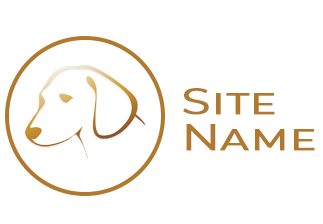
<style>
.page{position:relative;width:323px;height:224px;background:#ffffff}
.page>*{position:absolute;margin:0}
.t1{font:36px/36px "Montserrat-Regular";color:#b0792e;font-variant:small-caps;font-weight:bold;scale:1.3 1}
</style>
<div class="page">
<p class="t1" style="left:183px;top:88px;width:132px;height:63px">Site<br>Name</p>
</div>
